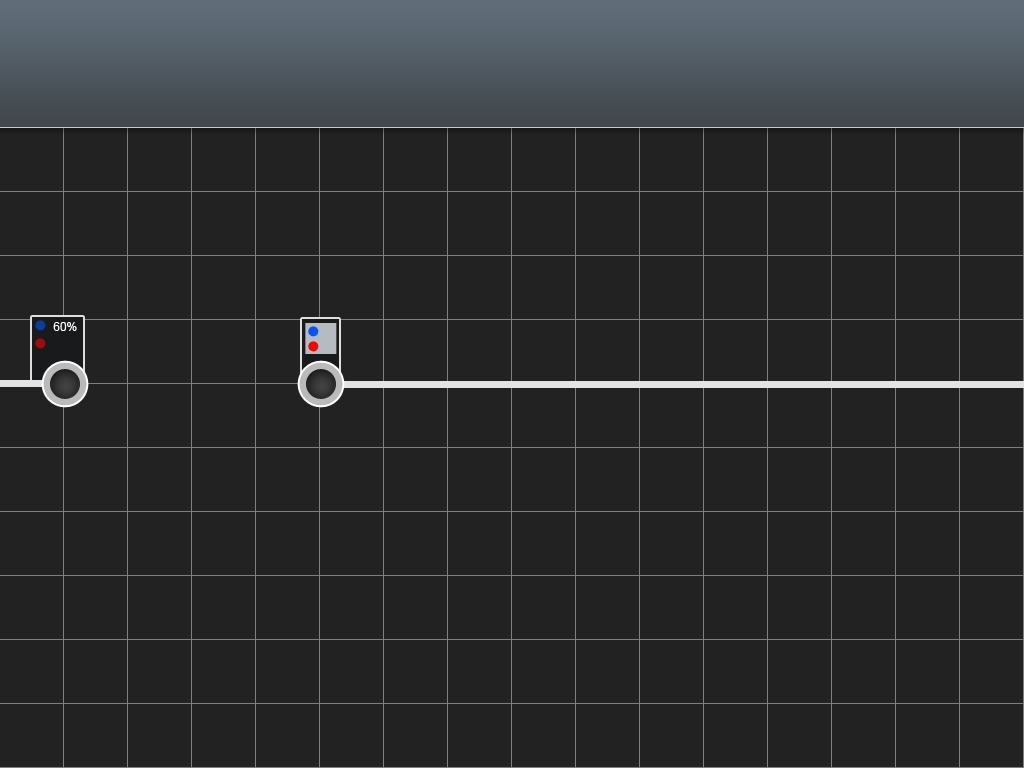
<style>
.page{position:relative;width:1024px;height:768px;background:#222222}
.page>*{position:absolute;margin:0}
.t1{font:12px "ArialMT";letter-spacing:-0.01em;color:#ffffff}
</style>
<div class="page">
<p class="t1" style="left:53px;top:322px;width:24px;height:9px">60%</p>
</div>
